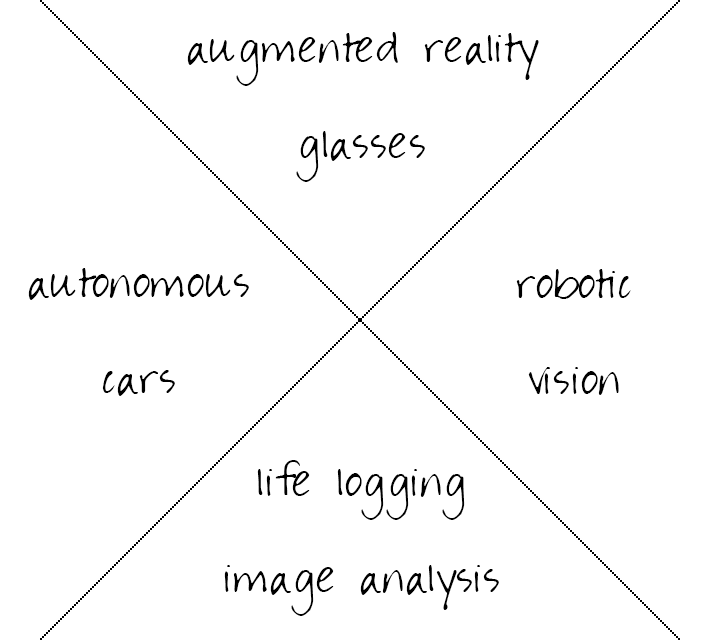
<style>
.page{position:relative;width:720px;height:640px;background:#ffffff}
.page>*{position:absolute;margin:0}
.t1{font:80px "Kristin";color:#000000}
</style>
<div class="page">
<p class="t1" style="left:187px;top:32px;width:352px;height:150px;text-align:center">augmented reality<br>glasses</p>
<p class="t1" style="left:28px;top:268px;width:221px;height:128px;text-align:center">autonomous<br>cars</p>
<p class="t1" style="left:516px;top:269px;width:115px;height:126px;text-align:center">robotic<br>vision</p>
<p class="t1" style="left:224px;top:460px;width:275px;height:156px;text-align:center">life logging<br>image analysis</p>
</div>
